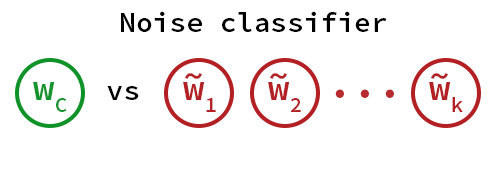
<style>
.page{position:relative;width:500px;height:170px;background:#ffffff}
.page>*{position:absolute;margin:0}
.t1{font:48px "SourceCodePro-Semibold";color:#000000}
.t2{font:36px "SourceCodePro-Semibold";color:#b32125}
.t3{font:36px "SourceCodePro-Semibold";color:#13942c}
.t4{font:72px "SourceCodePro-Semibold";color:#b72a2e}
</style>
<div class="page">
<p class="t1" style="left:121px;top:11px;width:266px;height:21px">Noise classifier</p>
<p class="t2" style="left:185px;top:73px;width:17px;height:6px">~</p>
<p class="t2" style="left:270px;top:73px;width:17px;height:6px">~</p>
<p class="t2" style="left:431px;top:73px;width:17px;height:6px">~</p>
<p class="t3" style="left:33px;top:82px;width:34px;height:30px">wC</p>
<p class="t1" style="left:107px;top:86px;width:32px;height:14px">vs</p>
<p class="t2" style="left:183px;top:82px;width:33px;height:30px">w1</p>
<p class="t2" style="left:268px;top:82px;width:33px;height:30px">w2</p>
<p class="t4" style="left:335px;top:89px;width:59px;height:9px">...</p>
<p class="t2" style="left:429px;top:82px;width:34px;height:30px">wk</p>
</div>
